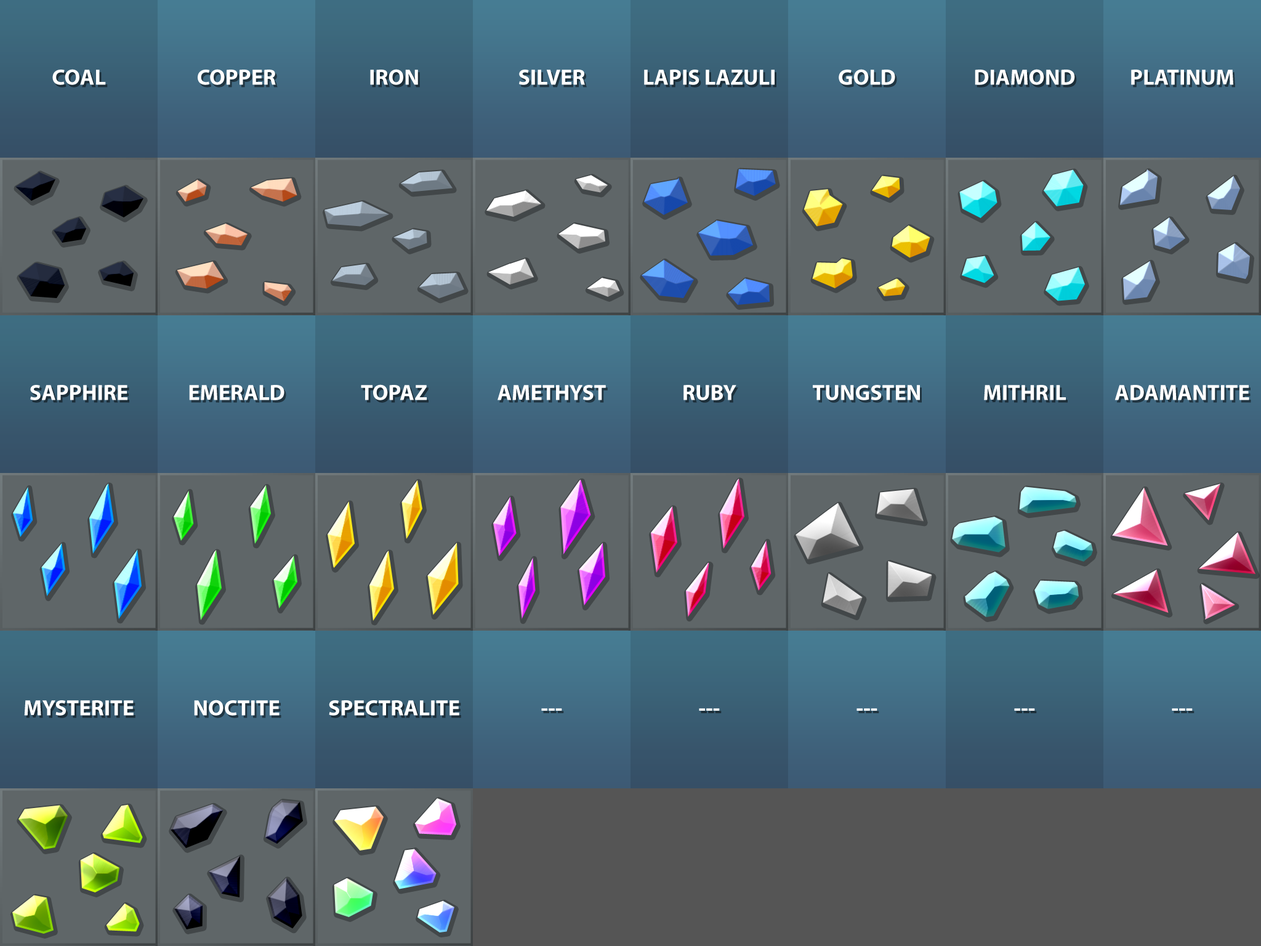
<style>
.page{position:relative;width:1261px;height:946px;background:#5f6668}
.page>*{position:absolute;margin:0}
.t1{font:22.2px "MyriadPro-Bold";color:#ffffff}
</style>
<div class="page">
<p class="t1" style="left:52px;top:69px;width:54px;height:16px">COAL</p>
<p class="t1" style="left:198px;top:69px;width:78px;height:16px">COPPER</p>
<p class="t1" style="left:370px;top:69px;width:48px;height:16px">IRON</p>
<p class="t1" style="left:519px;top:70px;width:66px;height:15px">SILVER</p>
<p class="t1" style="left:644px;top:70px;width:131px;height:15px">LAPIS LAZULI</p>
<p class="t1" style="left:839px;top:69px;width:56px;height:16px">GOLD</p>
<p class="t1" style="left:975px;top:69px;width:100px;height:16px">DIAMOND</p>
<p class="t1" style="left:1131px;top:70px;width:102px;height:15px">PLATINUM</p>
<p class="t1" style="left:30px;top:385px;width:97px;height:15px">SAPPHIRE</p>
<p class="t1" style="left:189px;top:385px;width:95px;height:15px">EMERALD</p>
<p class="t1" style="left:361px;top:384px;width:66px;height:16px">TOPAZ</p>
<p class="t1" style="left:497px;top:385px;width:109px;height:15px">AMETHYST</p>
<p class="t1" style="left:683px;top:385px;width:53px;height:15px">RUBY</p>
<p class="t1" style="left:813px;top:385px;width:107px;height:15px">TUNGSTEN</p>
<p class="t1" style="left:984px;top:385px;width:82px;height:15px">MITHRIL</p>
<p class="t1" style="left:1114px;top:385px;width:135px;height:15px">ADAMANTITE</p>
<p class="t1" style="left:24px;top:700px;width:110px;height:15px">MYSTERITE</p>
<p class="t1" style="left:194px;top:699px;width:86px;height:16px">NOCTITE</p>
<p class="t1" style="left:329px;top:700px;width:130px;height:15px">SPECTRALITE</p>
<p class="t1" style="left:541px;top:708px;width:21px;height:2px">---</p>
<p class="t1" style="left:699px;top:708px;width:21px;height:2px">---</p>
<p class="t1" style="left:856px;top:708px;width:21px;height:2px">---</p>
<p class="t1" style="left:1014px;top:708px;width:21px;height:2px">---</p>
<p class="t1" style="left:1172px;top:708px;width:21px;height:2px">---</p>
</div>
